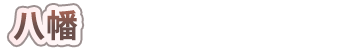
<style>
.page{position:relative;width:360px;height:50px;background:#ffffff}
.page>*{position:absolute;margin:0}
.t1{font:32px "SourceHanSansSC-Bold";font-weight:bold}
</style>
<div class="page">
<p class="t1" style="left:13px;top:10px;width:65px;height:31px">八幡</p>
</div>
